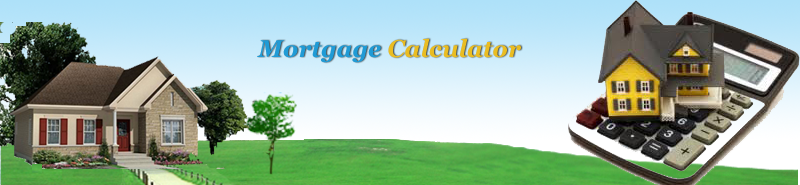
<style>
.page{position:relative;width:800px;height:185px}
.page>*{position:absolute;margin:0}
.t1{font:24px "Georgia-BoldItalic";color:#eabd22}
.t2{font:24px "CourierNewPS-BoldItalicMT";color:#0871dd}
.t3{font:24px "Georgia-BoldItalic";color:#1f9bd6}
</style>
<div class="page">
<p class="t1" style="left:257px;top:38px;width:264px;height:25px"><span class="t2">   </span><span class="t3">Mortgage </span>Calculator</p>
</div>
